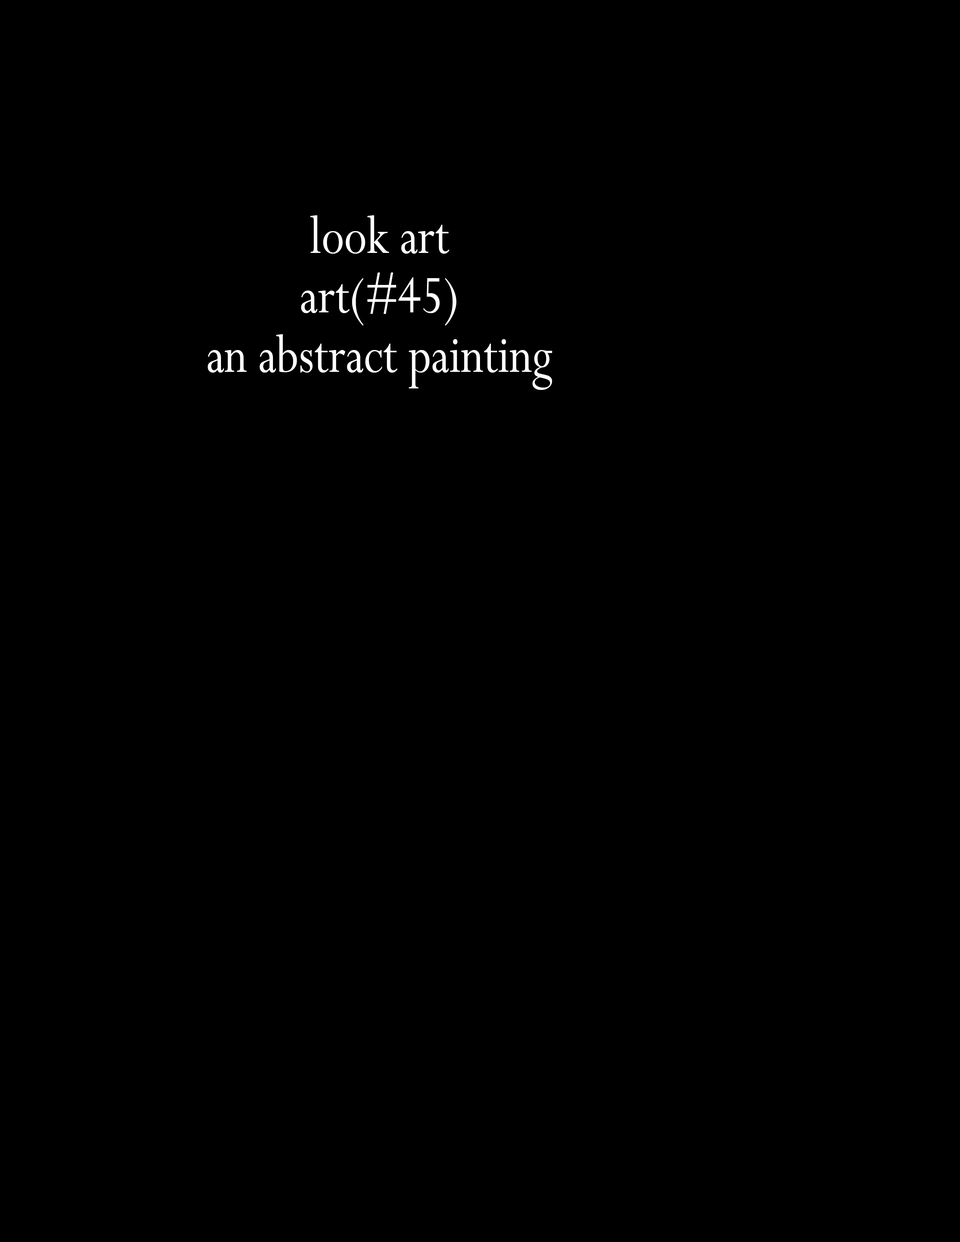
<style>
.page{position:relative;width:960px;height:1242px;background:#000000}
.page>*{position:absolute;margin:0}
.t1{font:60px "Perpetua";color:#ffffff;scale:0.83 1}
</style>
<div class="page">
<p class="t1" style="left:207px;top:215px;width:345px;height:175px;text-align:center">look art<br>art(#45)<br>an abstract painting</p>
</div>
